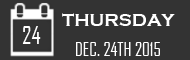
<style>
.page{position:relative;width:190px;height:60px;background:#333333}
.page>*{position:absolute;margin:0}
.t1{font:18px "CopperplateGothic-Bold";color:#ffffff}
.t2{font:24px "AgencyFB-Reg";color:#ffffff}
.t3{font:18px "AgencyFB-Reg";color:#ffffff}
</style>
<div class="page">
<p class="t1" style="left:62px;top:13px;width:113px;height:13px">THURSDAY</p>
<p class="t2" style="left:22px;top:26px;width:19px;height:18px">24</p>
<p class="t3" style="left:76px;top:42px;width:84px;height:14px">DEC. 24TH 2015</p>
</div>
